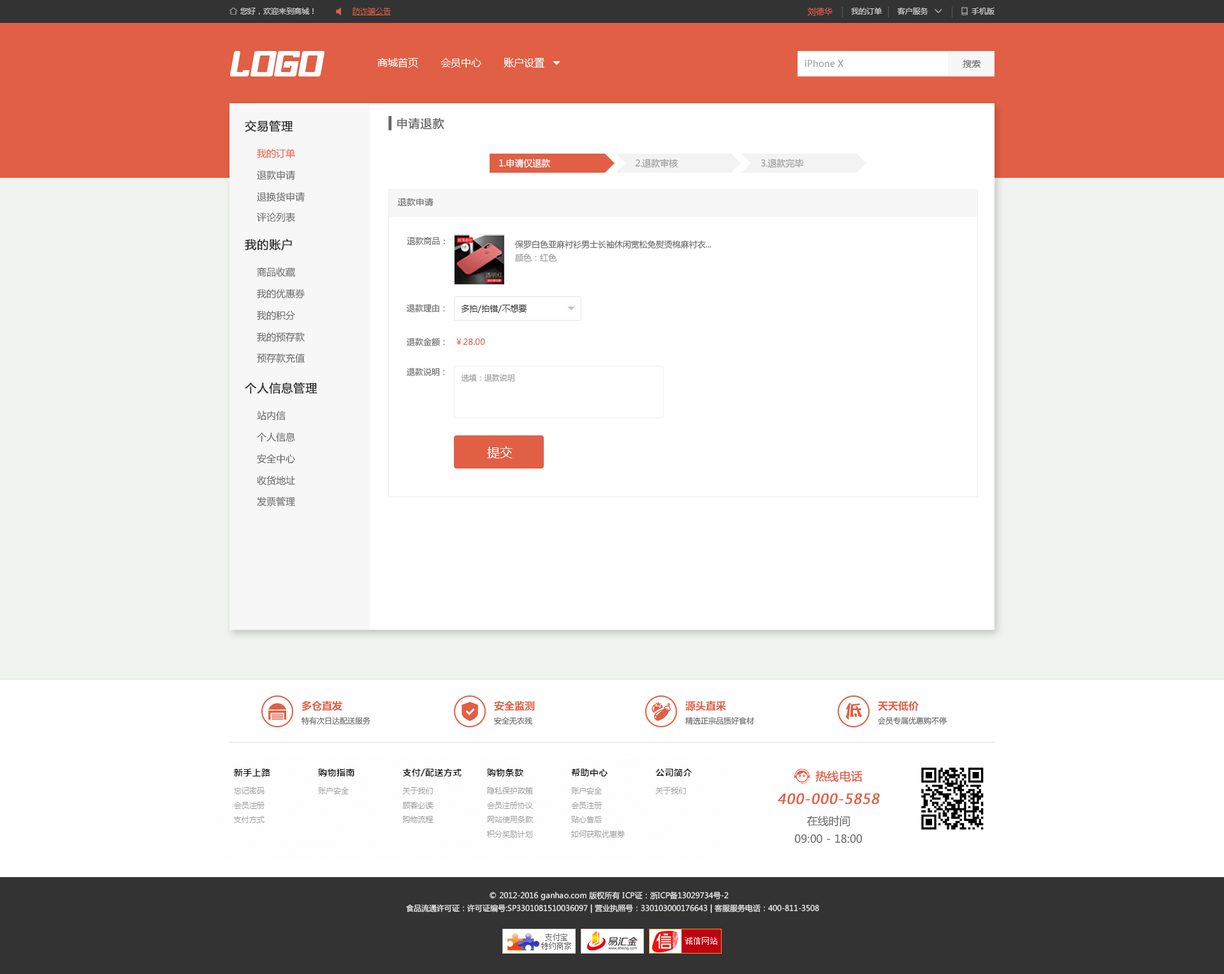
<style>
.page{position:relative;width:1224px;height:974px;background:#ffffff}
.page>*{position:absolute;margin:0}
.t1{font:8.3px "MicrosoftYaHei";color:#e15f45}
.t2{font:10.2px "MicrosoftYaHei";color:#ffffff}
.t3{font:8.9px "MicrosoftYaHei";color:#999999}
.t4{font:8.9px "MicrosoftYaHei";color:#666666}
.t5{font:11.5px "MicrosoftYaHei";color:#333333;font-weight:bold}
.t6{font:11.5px "MicrosoftYaHei";color:#666666;font-weight:bold}
.t7{font:9.6px "MicrosoftYaHei";color:#e15f45}
.t8{font:8.9px "MicrosoftYaHei";color:#fefefe}
.t9{font:9.6px "MicrosoftYaHei";color:#666666}
.t10{font:8.3px "MicrosoftYaHei";color:#666666}
.t11{font:8.3px "MicrosoftYaHei";color:#999999}
.t12{font:8.3px "MicrosoftYaHei";color:#333333}
.t13{font:7.7px "MicrosoftYaHei";color:#999999}
.t14{font:12.8px "MicrosoftYaHei";color:#ffffff}
.t15{font:10.2px "MicrosoftYaHei-Bold";color:#e15f45}
.t16{font:7.7px "MicrosoftYaHei";color:#666666}
.t17{font:11.5px "MicrosoftYaHei";color:#e15f45;font-weight:bold}
.t18{font:13.7px "MicrosoftYaHei";color:#e15f45;font-weight:bold;font-style:italic}
.t19{font:10.8px/17.8px "MicrosoftYaHei";color:#666666}
.t20{font:7.7px/12.8px "MicrosoftYaHei";color:#eeeeee}
</style>
<div class="page">
<p class="t1" style="left:808px;top:8px;width:25px;height:8px">刘德华</p>
<p class="t2" style="left:377px;top:57px;width:167px;height:11px">商城首页       会员中心       账户设置</p>
<p class="t3" style="left:805px;top:60px;width:38px;height:7px">iPhone X</p>
<p class="t4" style="left:963px;top:60px;width:18px;height:8px">搜索</p>
<p class="t5" style="left:245px;top:120px;width:48px;height:12px">交易管理</p>
<p class="t6" style="left:388px;top:116px;width:56px;height:15px">▍申请退款</p>
<p class="t7" style="left:257px;top:149px;width:38px;height:10px">我的订单</p>
<p class="t8" style="left:499px;top:159px;width:51px;height:9px">1.申请仅退款</p>
<p class="t3" style="left:635px;top:159px;width:43px;height:9px">2.退款审核</p>
<p class="t3" style="left:761px;top:159px;width:42px;height:9px">3.退款完毕</p>
<p class="t9" style="left:257px;top:170px;width:38px;height:10px">退款申请</p>
<p class="t9" style="left:257px;top:192px;width:48px;height:10px">退换货申请</p>
<p class="t4" style="left:398px;top:198px;width:36px;height:8px">退款申请</p>
<p class="t9" style="left:257px;top:212px;width:38px;height:10px">评论列表</p>
<p class="t5" style="left:245px;top:239px;width:47px;height:12px">我的账户</p>
<p class="t10" style="left:407px;top:237px;width:38px;height:8px">退款商品：</p>
<p class="t10" style="left:515px;top:240px;width:196px;height:9px">保罗白色亚麻衬衫男士长袖休闲宽松免熨烫棉麻衬衣...</p>
<p class="t11" style="left:515px;top:254px;width:42px;height:8px">颜色：红色</p>
<p class="t9" style="left:257px;top:267px;width:38px;height:10px">商品收藏</p>
<p class="t9" style="left:257px;top:289px;width:48px;height:9px">我的优惠券</p>
<p class="t10" style="left:407px;top:304px;width:38px;height:8px">退款理由：</p>
<p class="t12" style="left:461px;top:305px;width:66px;height:8px">多拍/拍错/不想要</p>
<p class="t9" style="left:257px;top:310px;width:38px;height:10px">我的积分</p>
<p class="t9" style="left:257px;top:332px;width:48px;height:10px">我的预存款</p>
<p class="t10" style="left:407px;top:338px;width:38px;height:8px">退款金额：</p>
<p class="t1" style="left:456px;top:339px;width:29px;height:6px">￥28.00</p>
<p class="t9" style="left:257px;top:353px;width:48px;height:10px">预存款充值</p>
<p class="t10" style="left:407px;top:368px;width:38px;height:8px">退款说明：</p>
<p class="t13" style="left:461px;top:374px;width:53px;height:8px">选填：退款说明</p>
<p class="t5" style="left:245px;top:383px;width:72px;height:11px">个人信息管理</p>
<p class="t9" style="left:257px;top:411px;width:29px;height:10px">站内信</p>
<p class="t9" style="left:257px;top:432px;width:38px;height:10px">个人信息</p>
<p class="t14" style="left:487px;top:446px;width:26px;height:12px">提交</p>
<p class="t9" style="left:257px;top:454px;width:38px;height:10px">安全中心</p>
<p class="t9" style="left:257px;top:476px;width:38px;height:10px">收货地址</p>
<p class="t9" style="left:257px;top:497px;width:38px;height:9px">发票管理</p>
<p class="t15" style="left:302px;top:701px;width:40px;height:10px">多仓直发</p>
<p class="t15" style="left:494px;top:701px;width:41px;height:10px">安全监测</p>
<p class="t15" style="left:685px;top:701px;width:41px;height:10px">源头直采</p>
<p class="t15" style="left:878px;top:701px;width:41px;height:10px">天天低价</p>
<p class="t16" style="left:302px;top:717px;width:68px;height:8px">特有次日达配送服务</p>
<p class="t16" style="left:494px;top:717px;width:38px;height:8px">安全无农残</p>
<p class="t16" style="left:685px;top:717px;width:69px;height:8px">精选正宗品质好食材</p>
<p class="t16" style="left:878px;top:717px;width:69px;height:8px">会员专属优惠购不停</p>
<p class="t17" style="left:815px;top:771px;width:48px;height:11px">热线电话</p>
<p class="t18" style="left:778px;top:793px;width:102px;height:12px">400-000-5858</p>
<p class="t19" style="left:794px;top:815px;width:69px;height:28px;text-align:center">在线时间<br>09:00 - 18:00</p>
<p class="t20" style="left:406px;top:891px;width:413px;height:23px;text-align:center">© 2012-2016 ganhao.com 版权所有 ICP证：浙ICP备13029734号-2   <br>食品流通许可证：许可证编号:SP3301081510036097 | 营业执照号：330103000176643 | 客服服务电话：400-811-3508</p>
</div>
